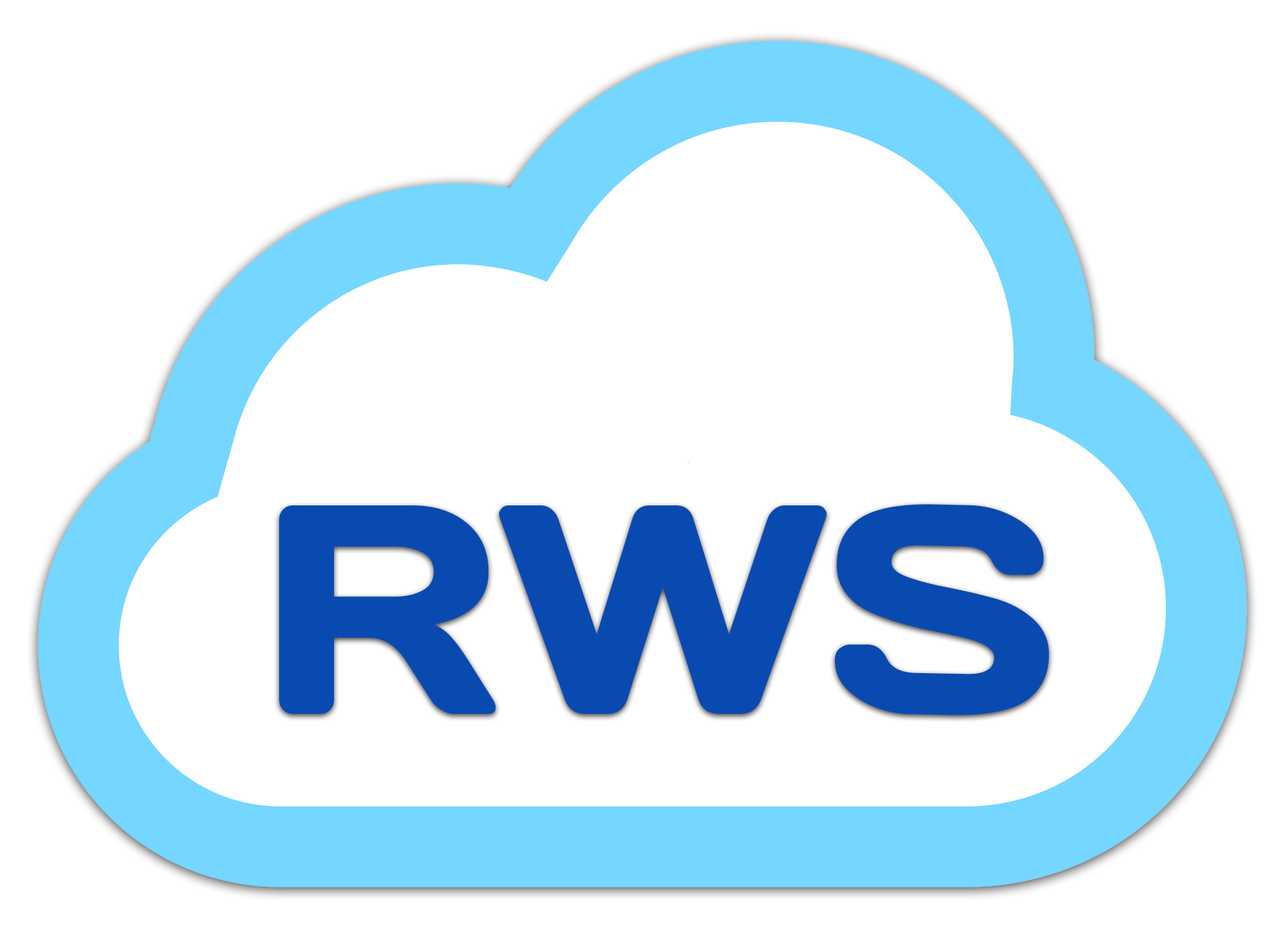
<style>
.page{position:relative;width:1285px;height:928px;background:#ffffff}
.page>*{position:absolute;margin:0}
.t1{font:297.4px "DaysOne-Regular";color:#094ab1}
</style>
<div class="page">
<p class="t1" style="left:279px;top:504px;width:770px;height:211px">RWS</p>
</div>
